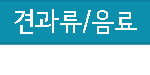
<style>
.page{position:relative;width:150px;height:75px;background:#ffffff}
.page>*{position:absolute;margin:0}
.t1{font:26px "SeoulNamsanB";color:#ffffff}
</style>
<div class="page">
<p class="t1" style="left:14px;top:9px;width:123px;height:25px">견과류/음료</p>
</div>
